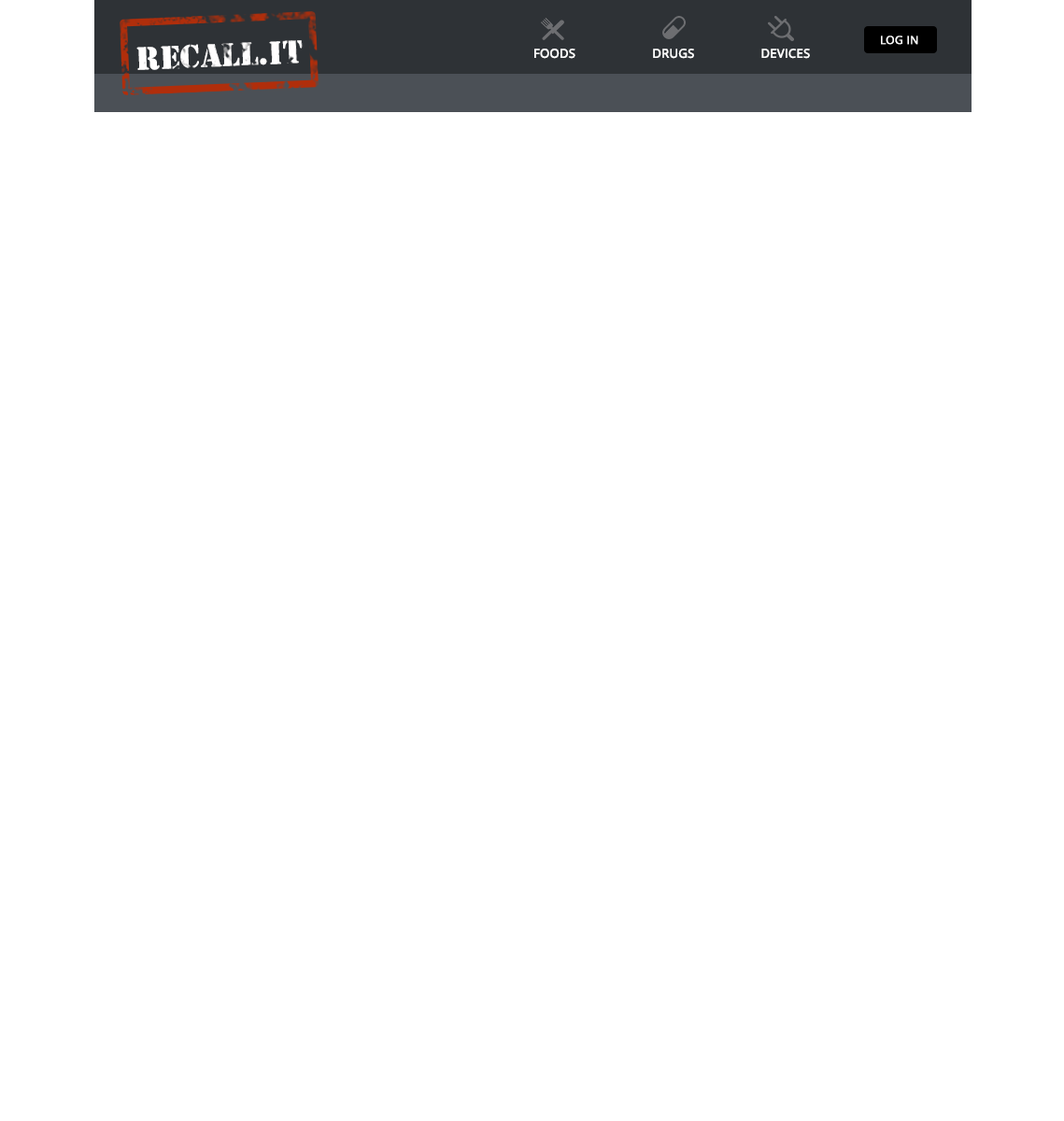
<style>
.page{position:relative;width:1064px;height:1121px;background:#ffffff}
.page>*{position:absolute;margin:0}
.t1{font:34.2px "Stencil";color:#fffefe}
.t2{font:11.2px "OpenSans";color:#ffffff;text-transform:uppercase;font-weight:bold}
.t3{font:12.1px "OpenSans";color:#ffffff;text-transform:uppercase;font-weight:bold}
</style>
<div class="page">
<p class="t1" style="left:136px;top:40px;width:167px;height:30px;rotate:-2deg">RECALL.IT</p>
<p class="t2" style="left:881px;top:35px;width:37px;height:10px">Log in</p>
<p class="t3" style="left:534px;top:49px;width:276px;height:10px">foods                      drugs                   devices</p>
</div>
